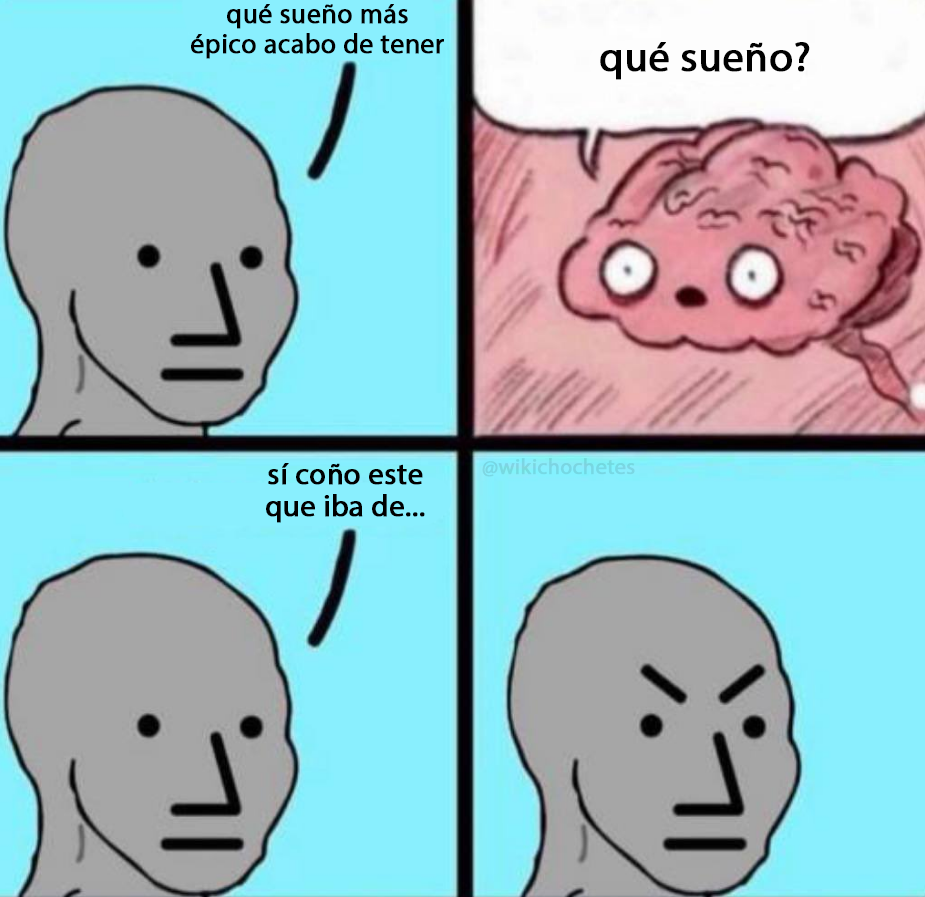
<style>
.page{position:relative;width:925px;height:897px;background:#89effe}
.page>*{position:absolute;margin:0}
.t1{font:27.4px "MyriadPro-Regular";color:#000000;font-weight:bold}
.t2{font:41.9px "MyriadPro-Regular";color:#000000;font-weight:bold}
.t3{font:21.7px "MyriadPro-Regular";color:#78d7e3;font-weight:bold}
.t4{font:30px "MyriadPro-Regular";color:#000000;font-weight:bold}
</style>
<div class="page">
<p class="t1" style="left:191px;top:4px;width:253px;height:55px;text-align:center">qué sueño más<br>épico acabo de tener</p>
<p class="t2" style="left:600px;top:42px;width:210px;height:38px">qué sueño?</p>
<p class="t3" style="left:482px;top:458px;width:153px;height:19px">@wikichochetes</p>
<p class="t4" style="left:266px;top:463px;width:159px;height:60px;text-align:center">sí coño este<br>que iba de...</p>
</div>
